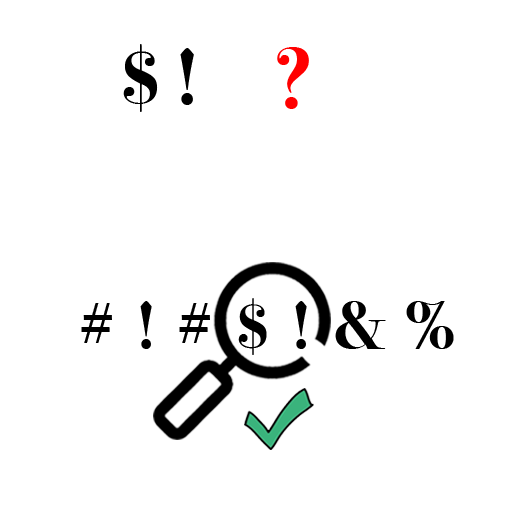
<style>
.page{position:relative;width:512px;height:512px;background:#ffffff}
.page>*{position:absolute;margin:0}
.t1{font:80px "BodoniSvtyTwoITCTT-Bold";color:#000000}
.t2{font:86.7px "BodoniSvtyTwoITCTT-Bold";color:#ff0000}
.t3{font:66.7px "BodoniSvtyTwoITCTT-Bold";color:#000000}
</style>
<div class="page">
<p class="t1" style="left:123px;top:44px;width:71px;height:68px">$ !</p>
<p class="t2" style="left:277px;top:47px;width:32px;height:62px">?</p>
<p class="t3" style="left:81px;top:298px;width:373px;height:57px">#  !  #  $  !  &amp;  %</p>
</div>
